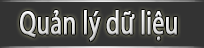
<style>
.page{position:relative;width:204px;height:48px;background:#333333}
.page>*{position:absolute;margin:0}
.t1{font:33.3px "MyriadPro-Regular";font-weight:bold;scale:0.72 1}
</style>
<div class="page">
<p class="t1" style="left:20px;top:10px;width:157px;height:32px">Quản lý dữ liệu</p>
</div>
